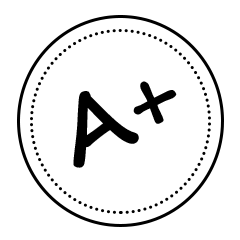
<style>
.page{position:relative;width:240px;height:240px;background:#ffffff}
.page>*{position:absolute;margin:0}
.t1{font:91.7px "SegoePrint-Bold";letter-spacing:0.02em;color:#000000}
</style>
<div class="page">
<p class="t1" style="left:73px;top:81px;width:104px;height:87px;rotate:-26deg">A+</p>
</div>
